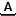
<style>
.page{position:relative;width:16px;height:16px;background:#ffffff}
.page>*{position:absolute;margin:0}
.t1{font:12px "Arial-BoldMT";color:#000000}
</style>
<div class="page">
<p class="t1" style="left:3px;top:2px;width:10px;height:9px">A</p>
</div>
